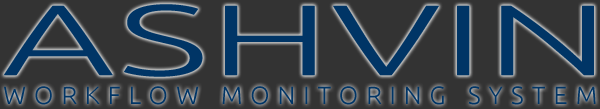
<style>
.page{position:relative;width:600px;height:109px;background:#333333}
.page>*{position:absolute;margin:0}
.t1{font:100px "Ubuntu-Light";letter-spacing:0.005em;color:#003566;scale:1.75 1}
.t2{font:25px "Ubuntu-Light";letter-spacing:0.32em;color:#003566}
</style>
<div class="page">
<p class="t1" style="left:3px;top:4px;width:591px;height:73px">ASHVIN</p>
<p class="t2" style="left:4px;top:86px;width:592px;height:19px">WORKFLOW MONITORING SYSTEM</p>
</div>
